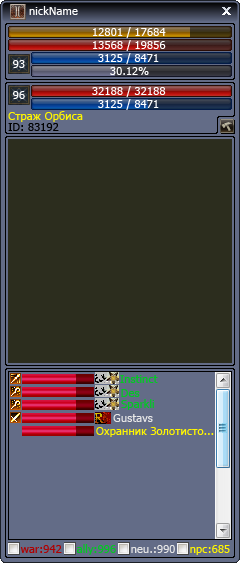
<style>
.page{position:relative;width:240px;height:563px;background:#2c2d1e}
.page>*{position:absolute;margin:0}
.t1{font:11.4px "Tahoma";color:#ffffff}
.t2{font:11.4px "Tahoma";color:#fff600}
.t3{font:11.4px "Tahoma";color:#000000}
.t4{font:11.4px "Tahoma";color:#00ca21}
.t5{font:11.4px "Tahoma";color:#e8e8e8}
.t6{font:11.4px "Tahoma";color:#b00000}
</style>
<div class="page">
<p class="t1" style="left:29px;top:6px;width:49px;height:9px">nickName</p>
<p class="t1" style="left:93px;top:27px;width:73px;height:11px">12801 / 17684</p>
<p class="t1" style="left:93px;top:40px;width:73px;height:11px">13568 / 19856</p>
<p class="t1" style="left:98px;top:53px;width:61px;height:11px">3125 / 8471</p>
<p class="t1" style="left:13px;top:60px;width:12px;height:8px">93</p>
<p class="t1" style="left:110px;top:67px;width:39px;height:8px">30.12%</p>
<p class="t1" style="left:92px;top:86px;width:74px;height:11px">32188 / 32188</p>
<p class="t1" style="left:13px;top:91px;width:12px;height:8px">96</p>
<p class="t1" style="left:98px;top:99px;width:61px;height:11px">3125 / 8471</p>
<p class="t2" style="left:8px;top:111px;width:75px;height:11px">Страж Орбиса</p>
<p class="t3" style="left:8px;top:123px;width:51px;height:8px">ID: 83192</p>
<p class="t4" style="left:120px;top:375px;width:38px;height:8px">Instinct</p>
<p class="t4" style="left:121px;top:389px;width:19px;height:8px">Des</p>
<p class="t4" style="left:121px;top:399px;width:33px;height:11px">Sparkli</p>
<p class="t5" style="left:113px;top:414px;width:40px;height:8px">Gustavs</p>
<p class="t2" style="left:96px;top:427px;width:118px;height:10px">Охранник Золотисто...</p>
<p class="t6" style="left:20px;top:545px;width:42px;height:8px">war:942</p>
<p class="t4" style="left:77px;top:544px;width:39px;height:11px">ally:996</p>
<p class="t5" style="left:131px;top:545px;width:44px;height:8px">neu.:990</p>
<p class="t2" style="left:190px;top:545px;width:40px;height:10px">npc:685</p>
</div>
